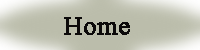
<style>
.page{position:relative;width:200px;height:50px;background:#bbbdab}
.page>*{position:absolute;margin:0}
.t1{font:26px "TimesNewRomanPSMT";letter-spacing:0.005em;color:#0c0a0a;font-weight:bold}
</style>
<div class="page">
<p class="t1" style="left:64px;top:17px;width:66px;height:18px">Home</p>
</div>
